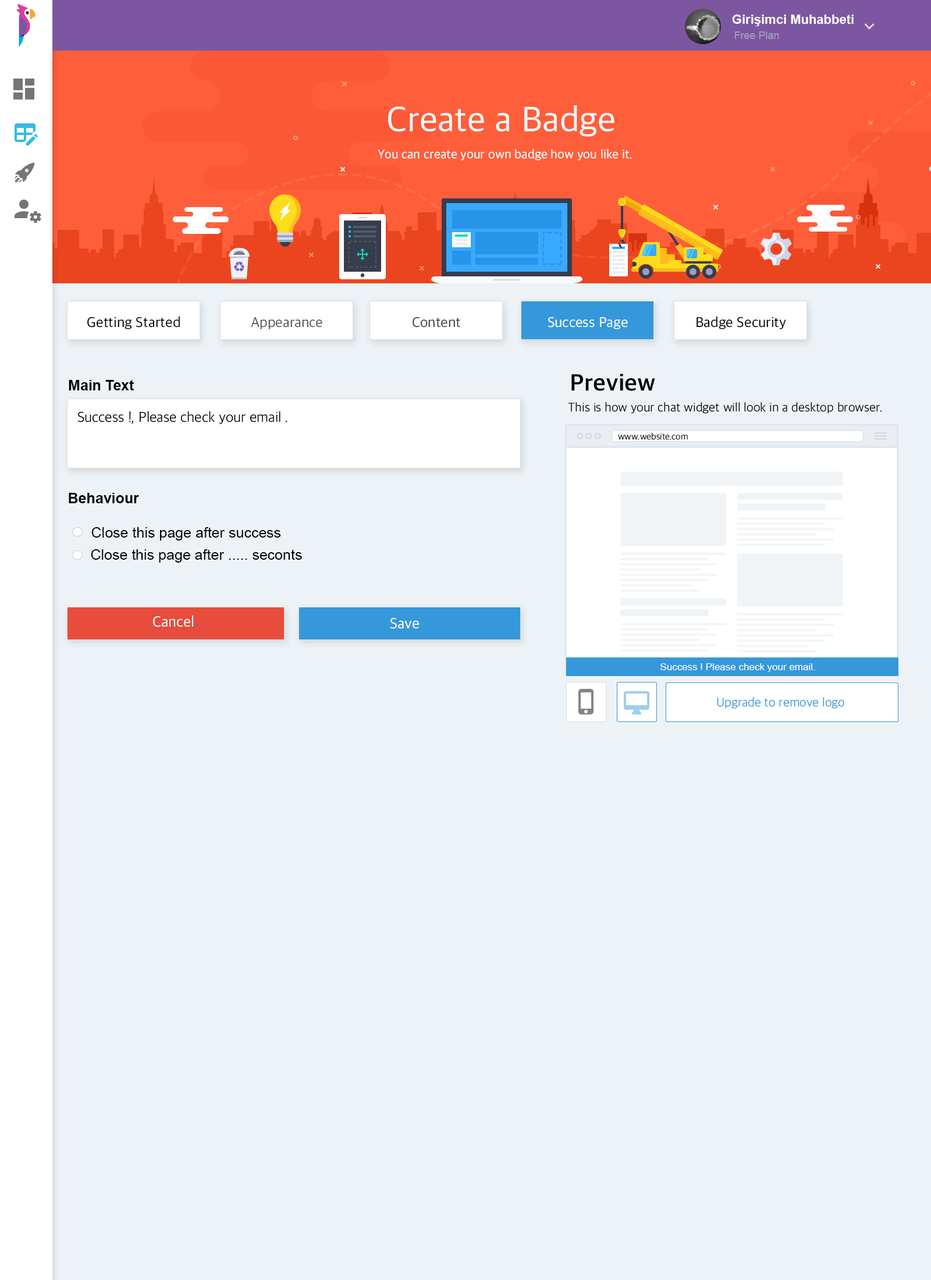
<style>
.page{position:relative;width:931px;height:1280px;background:#edf2f6}
.page>*{position:absolute;margin:0}
.t1{font:12.8px "Arial-BoldMT";color:#ffffff}
.t2{font:10.5px "ArialMT";color:#9a9fbf}
.t3{font:36.1px "AppleSDGothicNeo-Regular";color:#ffffff}
.t4{font:12.8px "AppleSDGothicNeo-Regular";color:#ffffff}
.t5{font:14.6px "AppleSDGothicNeo-Regular";color:#000000}
.t6{font:14.6px "AppleSDGothicNeo-Regular";color:#585858}
.t7{font:14.6px "AppleSDGothicNeo-Regular";color:#424242}
.t8{font:14.6px "AppleSDGothicNeo-Regular";color:#ffffff}
.t9{font:23.9px "AppleSDGothicNeo-Bold";color:#000000}
.t10{font:14.6px "Arial-BoldMT";color:#000000}
.t11{font:14.6px "AppleSDGothicNeo-Light";color:#000000}
.t12{font:12.8px "AppleSDGothicNeo-Light";color:#000000}
.t13{font:9.3px "AppleSDGothicNeo-Light";color:#000000}
.t14{font:14.6px "ArialMT";color:#000000}
.t15{font:15.1px "AppleSDGothicNeo-Regular";color:#ffffff}
.t16{font:9.9px "ArialMT";color:#ffffff}
.t17{font:12.8px "AppleSDGothicNeo-Light";color:#3498db}
</style>
<div class="page">
<p class="t1" style="left:732px;top:15px;width:122px;height:11px">Girişimci Muhabbeti</p>
<p class="t2" style="left:735px;top:31px;width:44px;height:8px">Free Plan</p>
<p class="t3" style="left:388px;top:105px;width:227px;height:32px">Create a Badge</p>
<p class="t4" style="left:378px;top:149px;width:254px;height:12px">You can create your own badge how you like it.</p>
<p class="t5" style="left:87px;top:317px;width:93px;height:12px">Getting Started</p>
<p class="t6" style="left:251px;top:317px;width:71px;height:12px">Appearance</p>
<p class="t7" style="left:413px;top:317px;width:47px;height:11px">Content</p>
<p class="t8" style="left:548px;top:317px;width:80px;height:12px">Success Page</p>
<p class="t5" style="left:697px;top:317px;width:89px;height:12px">Badge Security</p>
<p class="t9" style="left:572px;top:374px;width:83px;height:17px">Preview</p>
<p class="t10" style="left:69px;top:380px;width:65px;height:11px">Main Text</p>
<p class="t11" style="left:77px;top:411px;width:211px;height:13px">Success !, Please check your email .</p>
<p class="t12" style="left:568px;top:402px;width:314px;height:12px">This is how your chat widget will look in a desktop browser.</p>
<p class="t13" style="left:618px;top:432px;width:70px;height:8px">www.website.com</p>
<p class="t10" style="left:69px;top:493px;width:70px;height:10px">Behaviour</p>
<p class="t14" style="left:91px;top:527px;width:190px;height:14px">Close this page after success</p>
<p class="t14" style="left:91px;top:549px;width:211px;height:14px">Close this page after ..... seconts</p>
<p class="t15" style="left:153px;top:616px;width:40px;height:11px">Cancel</p>
<p class="t15" style="left:391px;top:618px;width:28px;height:11px">Save</p>
<p class="t16" style="left:661px;top:664px;width:154px;height:8px">Success ! Please check your email.</p>
<p class="t17" style="left:717px;top:697px;width:128px;height:12px">Upgrade to remove logo</p>
</div>
